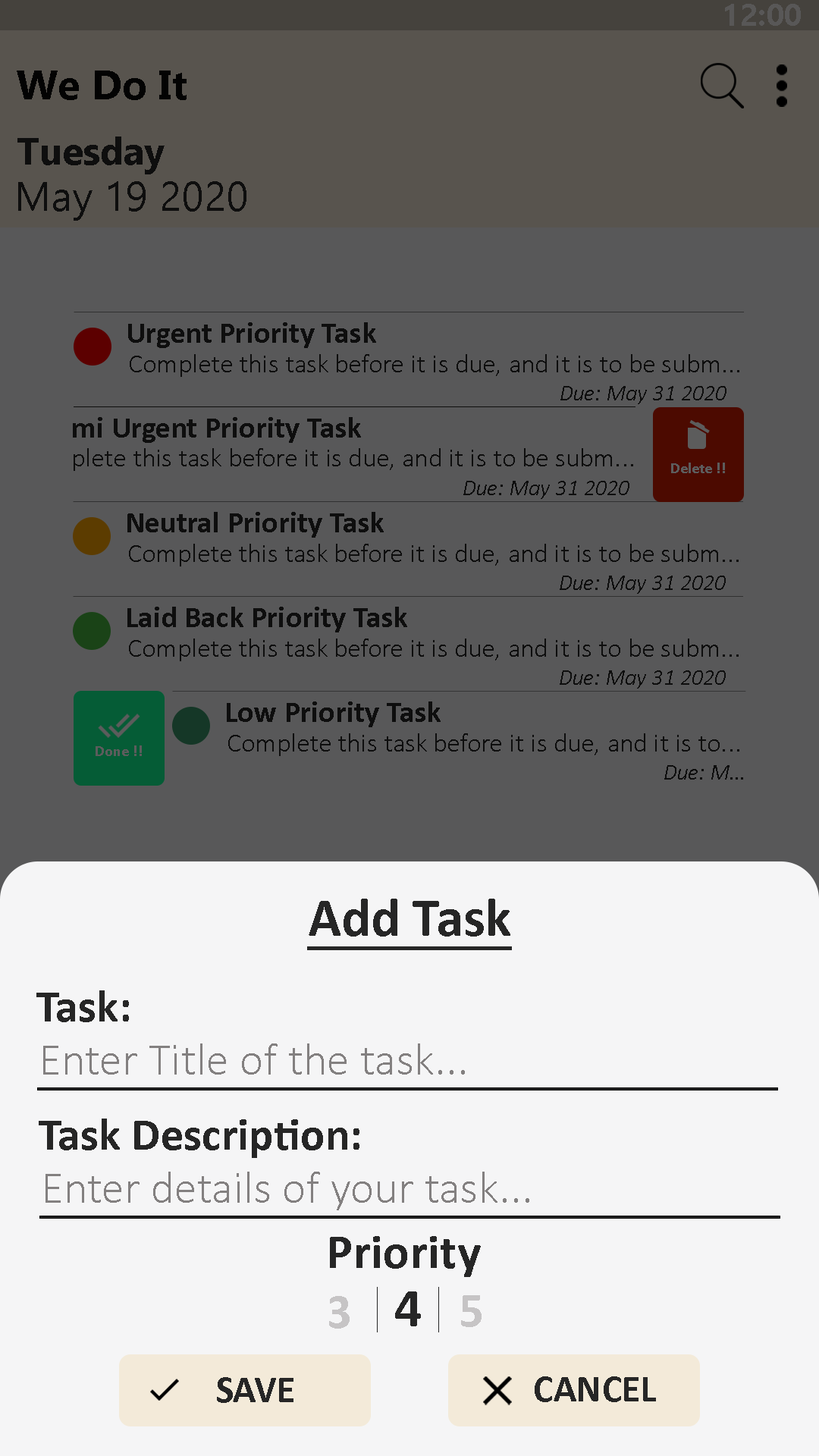
<style>
.page{position:relative;width:819px;height:1456px;background:#585859}
.page>*{position:absolute;margin:0}
.t1{font:30.8px "Ebrima-Bold";letter-spacing:0.005em;color:#585757}
.t2{font:40.9px "Ebrima-Bold";letter-spacing:0.005em;color:#070707}
.t3{font:37.9px "Ebrima-Bold";letter-spacing:0.005em;color:#262626}
.t4{font:40.9px "Ebrima";letter-spacing:0.005em;color:#262626}
.t5{font:30.3px "Calibri-Bold";letter-spacing:0.005em;color:#262626}
.t6{font:26.5px "Calibri-Light";letter-spacing:0.005em;color:#262626}
.t7{font:22.7px "Calibri-LightItalic";letter-spacing:0.005em;color:#262626}
.t8{font:15.2px "Calibri-Bold";letter-spacing:0.005em;color:#5c5c5c}
.t9{font:54.6px "Calibri-Bold";letter-spacing:0.005em;color:#262626;text-decoration:underline}
.t10{font:45.5px "Calibri-Bold";letter-spacing:0.005em;color:#262626}
.t11{font:45.5px "Calibri-Light";letter-spacing:0.005em;color:#838080}
.t12{font:49.3px "Calibri-Bold";letter-spacing:0.005em;color:#262626}
.t13{font:49.3px "Calibri-Bold";letter-spacing:0.005em;color:#c6c4c5}
.t14{font:54.6px "Calibri-Bold";letter-spacing:0.005em;color:#262626}
.t15{font:37.9px "Calibri-Bold";letter-spacing:0.005em;color:#262626}
</style>
<div class="page">
<p class="t1" style="left:725px;top:4px;width:76px;height:22px">12:00</p>
<p class="t2" style="left:17px;top:71px;width:170px;height:29px">We Do It</p>
<p class="t3" style="left:17px;top:136px;width:148px;height:38px">Tuesday</p>
<p class="t4" style="left:18px;top:181px;width:228px;height:40px">May 19 2020</p>
<p class="t5" style="left:128px;top:322px;width:248px;height:26px">Urgent Priority Task</p>
<p class="t6" style="left:130px;top:354px;width:609px;height:23px">Complete this task before it is due, and it is to be subm...</p>
<p class="t7" style="left:560px;top:386px;width:166px;height:18px">Due: May 31 2020</p>
<p class="t5" style="left:73px;top:417px;width:288px;height:26px">mi Urgent Priority Task</p>
<p class="t6" style="left:74px;top:448px;width:559px;height:23px">plete this task before it is due, and it is to be subm...</p>
<p class="t8" style="left:671px;top:463px;width:54px;height:10px">Delete !!</p>
<p class="t7" style="left:463px;top:481px;width:166px;height:18px">Due: May 31 2020</p>
<p class="t5" style="left:127px;top:512px;width:257px;height:26px">Neutral Priority Task</p>
<p class="t6" style="left:129px;top:544px;width:610px;height:22px">Complete this task before it is due, and it is to be subm...</p>
<p class="t7" style="left:560px;top:576px;width:166px;height:18px">Due: May 31 2020</p>
<p class="t5" style="left:127px;top:607px;width:280px;height:25px">Laid Back Priority Task</p>
<p class="t6" style="left:129px;top:639px;width:610px;height:22px">Complete this task before it is due, and it is to be subm...</p>
<p class="t7" style="left:560px;top:670px;width:166px;height:19px">Due: May 31 2020</p>
<p class="t5" style="left:227px;top:701px;width:214px;height:26px">Low Priority Task</p>
<p class="t6" style="left:228px;top:733px;width:511px;height:23px">Complete this task before it is due, and it is to...</p>
<p class="t8" style="left:96px;top:745px;width:46px;height:11px">Done !!</p>
<p class="t7" style="left:664px;top:765px;width:79px;height:15px">Due: M...</p>
<p class="t9" style="left:307px;top:899px;width:205px;height:51px">Add Task</p>
<p class="t10" style="left:36px;top:990px;width:93px;height:32px">Task:</p>
<p class="t11" style="left:43px;top:1043px;width:422px;height:32px">Enter Title of the task...</p>
<p class="t10" style="left:39px;top:1119px;width:320px;height:39px">Task Description:</p>
<p class="t11" style="left:45px;top:1172px;width:484px;height:38px">Enter details of your task...</p>
<p class="t12" style="left:330px;top:1236px;width:151px;height:41px">Priority</p>
<p class="t13" style="left:329px;top:1296px;width:21px;height:33px">3</p>
<p class="t14" style="left:395px;top:1291px;width:26px;height:35px">4</p>
<p class="t13" style="left:461px;top:1295px;width:21px;height:32px">5</p>
<p class="t15" style="left:217px;top:1377px;width:76px;height:26px">SAVE</p>
<p class="t15" style="left:535px;top:1376px;width:121px;height:26px">CANCEL</p>
</div>
